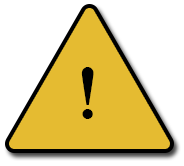
<style>
.page{position:relative;width:184px;height:166px;background:#ffffff}
.page>*{position:absolute;margin:0}
.t1{font:76.5px "BellMTBold";color:#000000}
</style>
<div class="page">
<p class="t1" style="left:81px;top:67px;width:13px;height:52px">!</p>
</div>
